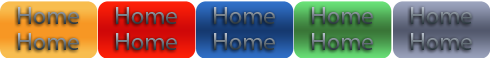
<style>
.page{position:relative;width:490px;height:58px}
.page>*{position:absolute;margin:0}
.t1{font:25px "MyriadPro-Regular"}
</style>
<div class="page">
<p class="t1" style="left:18px;top:7px;width:61px;height:17px">Home</p>
<p class="t1" style="left:116px;top:7px;width:61px;height:17px">Home</p>
<p class="t1" style="left:214px;top:7px;width:61px;height:17px">Home</p>
<p class="t1" style="left:312px;top:7px;width:61px;height:17px">Home</p>
<p class="t1" style="left:18px;top:33px;width:61px;height:17px">Home</p>
<p class="t1" style="left:116px;top:33px;width:61px;height:17px">Home</p>
<p class="t1" style="left:214px;top:33px;width:61px;height:17px">Home</p>
<p class="t1" style="left:312px;top:33px;width:61px;height:17px">Home</p>
</div>
